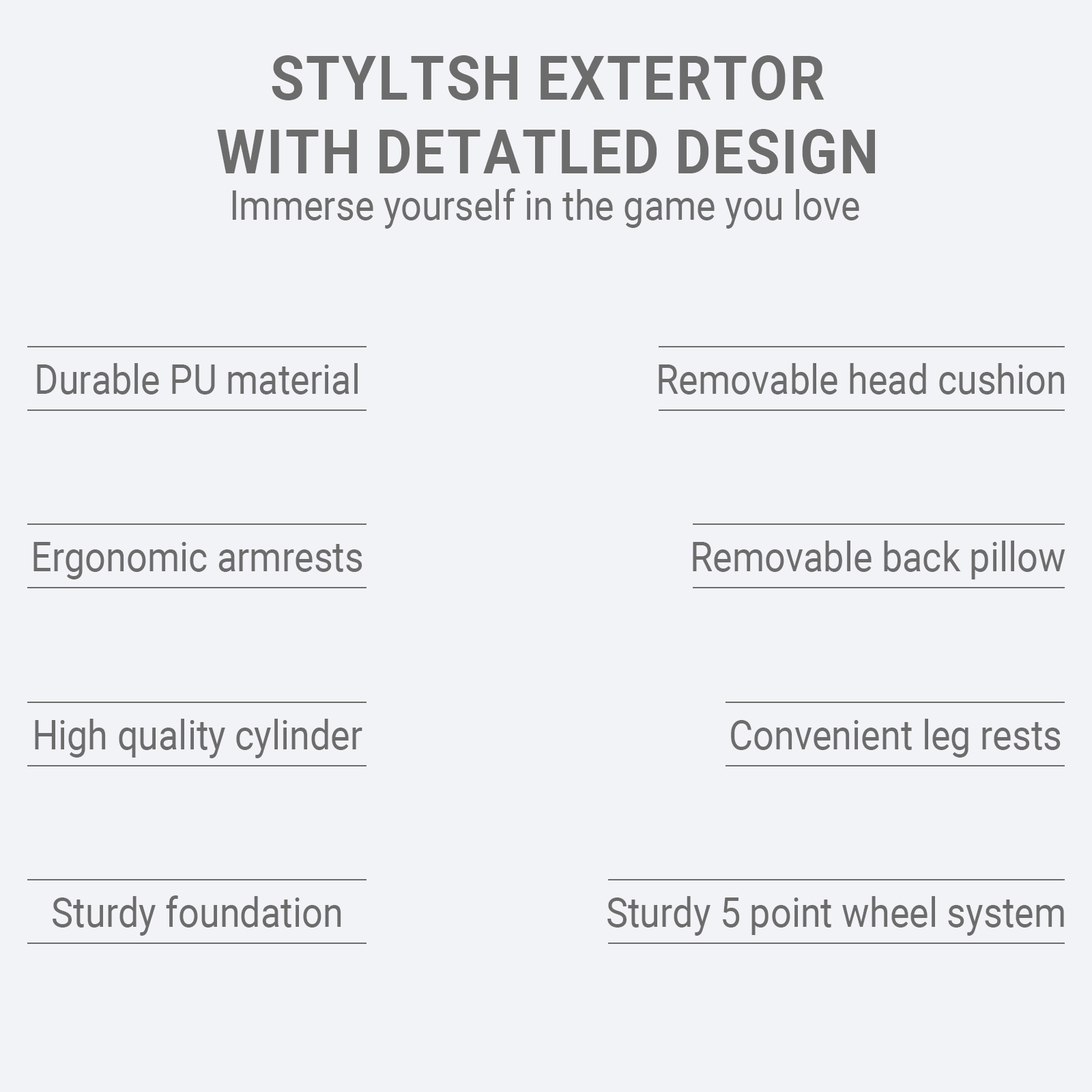
<style>
.page{position:relative;width:1092px;height:1092px;background:#f2f3f6}
.page>*{position:absolute;margin:0}
.t1{font:61.4px "Roboto-Bold";color:#6c6c6c;text-transform:uppercase;scale:0.9 1}
.t2{font:40.9px "Roboto-Regular";color:#6c6c6c;scale:0.9 1}
</style>
<div class="page">
<p class="t1" style="left:217px;top:55px;width:658px;height:119px;text-align:center">Styltsh extertor<br>With detatled design</p>
<p class="t2" style="left:232px;top:188px;width:627px;height:41px">Immerse yourself in the game you love</p>
<p class="t2" style="left:37px;top:363px;width:321px;height:31px">Durable PU material</p>
<p class="t2" style="left:659px;top:363px;width:406px;height:31px">Removable head cushion</p>
<p class="t2" style="left:33px;top:542px;width:329px;height:37px">Ergonomic armrests</p>
<p class="t2" style="left:693px;top:541px;width:372px;height:38px">Removable back pillow</p>
<p class="t2" style="left:35px;top:719px;width:327px;height:39px">High quality cylinder</p>
<p class="t2" style="left:731px;top:719px;width:330px;height:39px">Convenient leg rests</p>
<p class="t2" style="left:53px;top:895px;width:288px;height:41px">Sturdy foundation</p>
<p class="t2" style="left:607px;top:896px;width:457px;height:40px">Sturdy 5 point wheel system</p>
</div>
